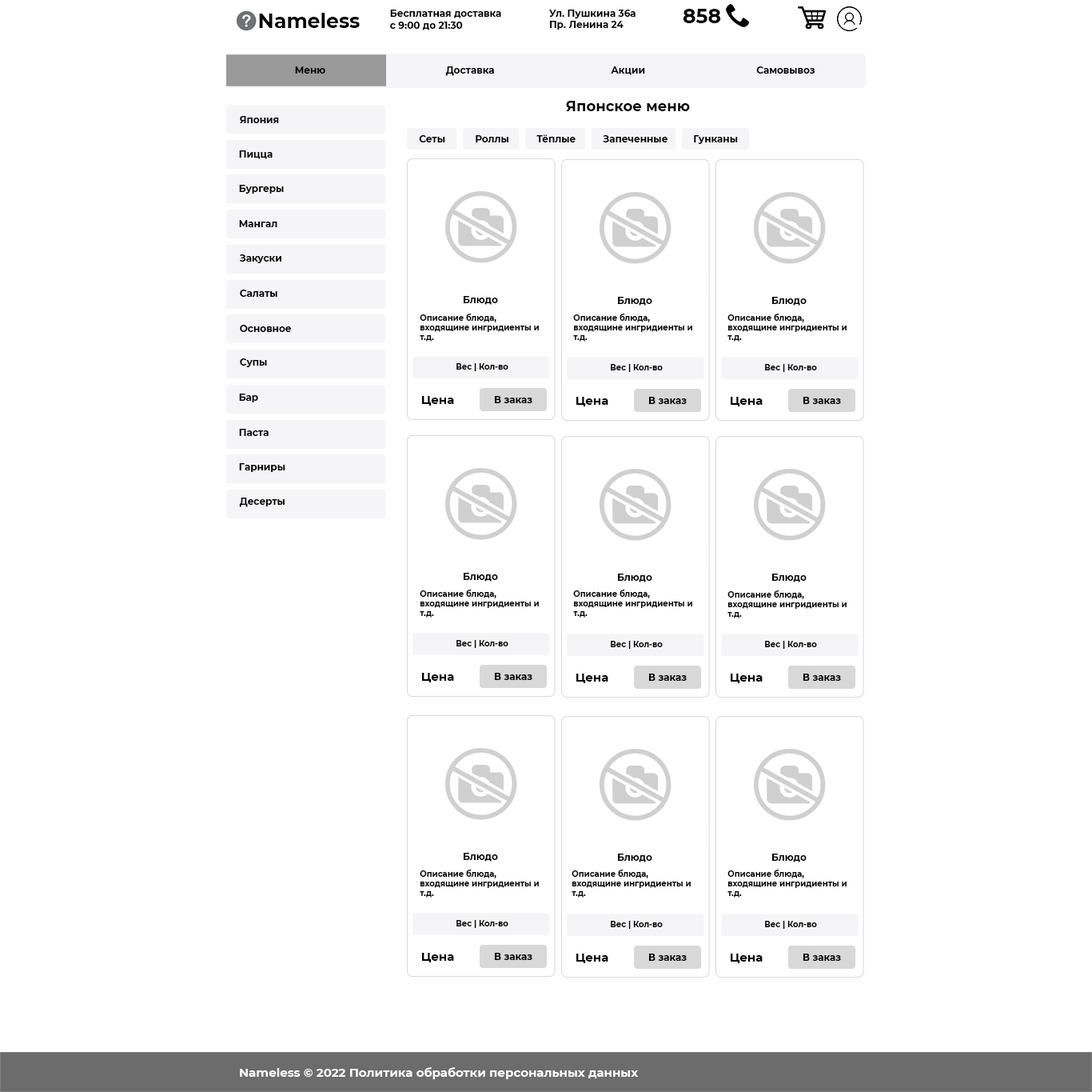
<style>
.page{position:relative;width:1092px;height:1092px;background:#ffffff}
.page>*{position:absolute;margin:0}
.t1{font:20px "Montserrat-Bold";color:#000000}
.t2{font:9.6px "Montserrat-Bold";color:#000000}
.t3{font:14.4px "Montserrat-Bold";color:#010101}
.t4{font:9.6px "Montserrat-Bold";color:#010101}
.t5{font:8px "Montserrat-Bold";color:#010101}
.t6{font:12px "Montserrat-Bold";color:#010101}
.t7{font:12px "Montserrat-Bold";color:#ffffff}
</style>
<div class="page">
<p class="t1" style="left:259px;top:13px;width:101px;height:15px">Nameless</p>
<p class="t2" style="left:390px;top:10px;width:111px;height:20px">Бесплатная доставка<br>с 9:00 до 21:30</p>
<p class="t2" style="left:549px;top:10px;width:87px;height:20px">Ул. Пушкина 36а<br>Пр. Ленина 24</p>
<p class="t1" style="left:683px;top:9px;width:38px;height:14px">858</p>
<p class="t2" style="left:295px;top:66px;width:30px;height:8px">Меню</p>
<p class="t2" style="left:445px;top:66px;width:49px;height:10px">Доставка</p>
<p class="t2" style="left:611px;top:66px;width:34px;height:9px">Акции</p>
<p class="t2" style="left:757px;top:66px;width:59px;height:8px">Самовывоз</p>
<p class="t3" style="left:566px;top:101px;width:124px;height:10px">Японское меню</p>
<p class="t4" style="left:240px;top:116px;width:39px;height:7px">Япония</p>
<p class="t4" style="left:419px;top:135px;width:26px;height:7px">Сеты</p>
<p class="t4" style="left:476px;top:135px;width:33px;height:7px">Роллы</p>
<p class="t4" style="left:537px;top:134px;width:39px;height:8px">Тёплые</p>
<p class="t4" style="left:603px;top:135px;width:65px;height:7px">Запеченные</p>
<p class="t4" style="left:694px;top:135px;width:44px;height:9px">Гунканы</p>
<p class="t4" style="left:239px;top:150px;width:34px;height:9px">Пицца</p>
<p class="t4" style="left:239px;top:185px;width:45px;height:9px">Бургеры</p>
<p class="t4" style="left:239px;top:220px;width:38px;height:7px">Мангал</p>
<p class="t4" style="left:240px;top:254px;width:41px;height:9px">Закуски</p>
<p class="t4" style="left:240px;top:289px;width:37px;height:8px">Салаты</p>
<p class="t4" style="left:463px;top:296px;width:35px;height:9px">Блюдо</p>
<p class="t4" style="left:617px;top:297px;width:36px;height:8px">Блюдо</p>
<p class="t4" style="left:772px;top:297px;width:35px;height:8px">Блюдо</p>
<p class="t5" style="left:420px;top:313px;width:119px;height:28px">Описание блюда, входящине ингридиенты и т.д.</p>
<p class="t5" style="left:573px;top:313px;width:120px;height:28px">Описание блюда, входящине ингридиенты и т.д.</p>
<p class="t5" style="left:728px;top:313px;width:119px;height:28px">Описание блюда, входящине ингридиенты и т.д.</p>
<p class="t4" style="left:240px;top:325px;width:51px;height:7px">Основное</p>
<p class="t4" style="left:240px;top:358px;width:27px;height:9px">Супы</p>
<p class="t5" style="left:457px;top:363px;width:52px;height:8px">Вес | Кол-во</p>
<p class="t5" style="left:611px;top:364px;width:52px;height:8px">Вес | Кол-во</p>
<p class="t5" style="left:765px;top:364px;width:52px;height:8px">Вес | Кол-во</p>
<p class="t4" style="left:239px;top:393px;width:19px;height:9px">Бар</p>
<p class="t6" style="left:422px;top:396px;width:32px;height:9px">Цена</p>
<p class="t4" style="left:494px;top:396px;width:39px;height:7px">В заказ</p>
<p class="t6" style="left:577px;top:397px;width:32px;height:9px">Цена</p>
<p class="t4" style="left:649px;top:397px;width:38px;height:7px">В заказ</p>
<p class="t6" style="left:731px;top:397px;width:32px;height:9px">Цена</p>
<p class="t4" style="left:803px;top:397px;width:38px;height:7px">В заказ</p>
<p class="t4" style="left:239px;top:429px;width:30px;height:7px">Паста</p>
<p class="t4" style="left:239px;top:463px;width:46px;height:9px">Гарниры</p>
<p class="t4" style="left:239px;top:497px;width:46px;height:10px">Десерты</p>
<p class="t4" style="left:463px;top:573px;width:35px;height:8px">Блюдо</p>
<p class="t4" style="left:617px;top:573px;width:36px;height:9px">Блюдо</p>
<p class="t4" style="left:772px;top:573px;width:35px;height:9px">Блюдо</p>
<p class="t5" style="left:420px;top:589px;width:119px;height:28px">Описание блюда, входящине ингридиенты и т.д.</p>
<p class="t5" style="left:573px;top:589px;width:120px;height:28px">Описание блюда, входящине ингридиенты и т.д.</p>
<p class="t5" style="left:728px;top:590px;width:119px;height:28px">Описание блюда, входящине ингридиенты и т.д.</p>
<p class="t5" style="left:457px;top:640px;width:52px;height:8px">Вес | Кол-во</p>
<p class="t5" style="left:611px;top:641px;width:52px;height:8px">Вес | Кол-во</p>
<p class="t5" style="left:765px;top:641px;width:52px;height:8px">Вес | Кол-во</p>
<p class="t6" style="left:422px;top:673px;width:32px;height:9px">Цена</p>
<p class="t4" style="left:494px;top:673px;width:39px;height:7px">В заказ</p>
<p class="t6" style="left:577px;top:673px;width:32px;height:10px">Цена</p>
<p class="t4" style="left:649px;top:673px;width:38px;height:8px">В заказ</p>
<p class="t6" style="left:731px;top:673px;width:32px;height:10px">Цена</p>
<p class="t4" style="left:803px;top:673px;width:38px;height:8px">В заказ</p>
<p class="t4" style="left:463px;top:852px;width:35px;height:9px">Блюдо</p>
<p class="t4" style="left:617px;top:853px;width:36px;height:9px">Блюдо</p>
<p class="t4" style="left:772px;top:853px;width:35px;height:9px">Блюдо</p>
<p class="t5" style="left:420px;top:869px;width:119px;height:28px">Описание блюда, входящине ингридиенты и т.д.</p>
<p class="t5" style="left:572px;top:869px;width:119px;height:28px">Описание блюда, входящине ингридиенты и т.д.</p>
<p class="t5" style="left:728px;top:869px;width:119px;height:28px">Описание блюда, входящине ингридиенты и т.д.</p>
<p class="t5" style="left:457px;top:920px;width:52px;height:8px">Вес | Кол-во</p>
<p class="t5" style="left:611px;top:920px;width:52px;height:8px">Вес | Кол-во</p>
<p class="t5" style="left:765px;top:920px;width:52px;height:8px">Вес | Кол-во</p>
<p class="t6" style="left:422px;top:952px;width:32px;height:10px">Цена</p>
<p class="t4" style="left:494px;top:952px;width:39px;height:8px">В заказ</p>
<p class="t6" style="left:577px;top:953px;width:32px;height:10px">Цена</p>
<p class="t4" style="left:649px;top:953px;width:38px;height:7px">В заказ</p>
<p class="t6" style="left:731px;top:953px;width:32px;height:10px">Цена</p>
<p class="t4" style="left:803px;top:953px;width:38px;height:7px">В заказ</p>
<p class="t7" style="left:240px;top:1067px;width:399px;height:12px">Nameless © 2022 Политика обработки персональных данных</p>
</div>
